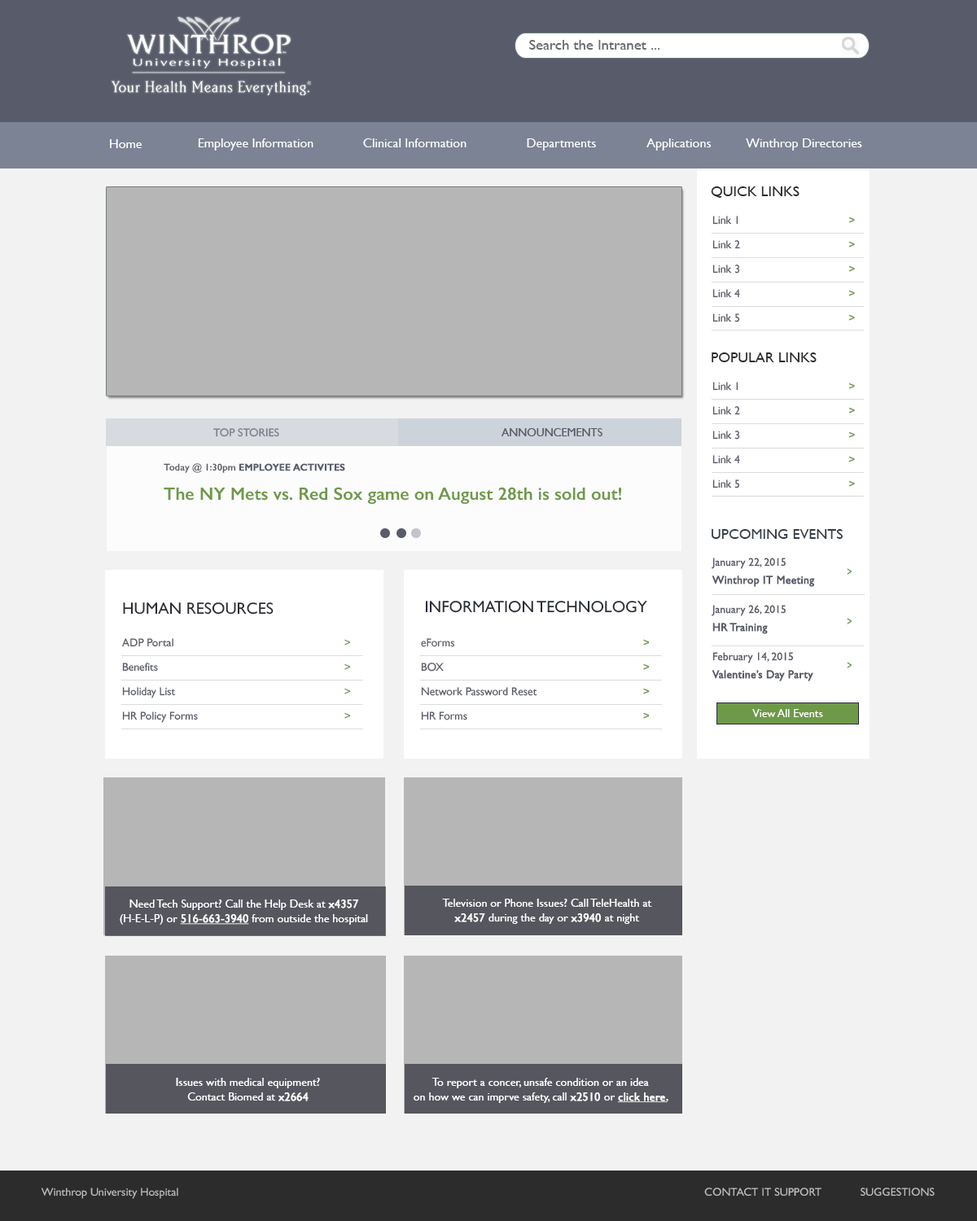
<style>
.page{position:relative;width:977px;height:1221px;background:#f2f2f2}
.page>*{position:absolute;margin:0}
.t1{font:14.7px "GillSans";color:#696b71;scale:1.03 1}
.t2{font:13px "GillSans";color:#ffffff}
.t3{font:14.7px "GillSans";color:#2c2c2d;text-transform:uppercase}
.t4{font:11.4px/24.4px "GillSans";color:#585b69}
.t5{font:11.4px/24.4px "GillSans";color:#6e9948}
.t6{font:17.9px/14.7px "GillSans-SemiBold";color:#6e9948}
.t7{font:9.8px/14.7px "GillSans-SemiBold";color:#6e9948}
.t8{font:9.8px/14.7px "GillSans-SemiBold";color:#585b69}
.t9{font:9.8px/14.7px "GillSans-SemiBold";color:#585b69;font-weight:bold}
.t10{font:14.7px "GillSans";color:#343d46;text-transform:uppercase}
.t11{font:11.4px/17.9px "GillSans";color:#585b69;font-weight:bold}
.t12{font:11.4px/17.9px "GillSans";color:#585b69}
.t13{font:11.4px/14.7px "GillSans";color:#585b69}
.t14{font:16.3px "GillSans";color:#292d39;text-transform:uppercase}
.t15{font:19.5px "GillSans";color:#292d39;text-transform:uppercase}
.t16{font:11.4px/14.7px "GillSans";color:#ffffff}
.t17{font:11.4px/14.7px "GillSans";color:#ffffff;font-weight:bold}
.t18{font:11.4px/14.7px "GillSans";color:#ffffff;font-weight:bold;text-decoration:underline}
.t19{font:11.4px "GillSans";color:#bebebe;text-transform:uppercase}
.t20{font:11.4px "GillSans";color:#bebebe}
</style>
<div class="page">
<p class="t1" style="left:529px;top:40px;width:131px;height:10px">Search the Intranet ...</p>
<p class="t2" style="left:110px;top:139px;width:32px;height:9px">Home</p>
<p class="t2" style="left:198px;top:138px;width:115px;height:13px">Employee Information</p>
<p class="t2" style="left:363px;top:138px;width:103px;height:9px">Clinical Information</p>
<p class="t2" style="left:527px;top:138px;width:69px;height:13px">Departments</p>
<p class="t2" style="left:646px;top:138px;width:65px;height:13px">Applications</p>
<p class="t2" style="left:746px;top:138px;width:116px;height:13px">Winthrop Directories</p>
<p class="t3" style="left:711px;top:186px;width:88px;height:12px">QUICK Links</p>
<p class="t4" style="left:712px;top:216px;width:143px;height:106px">Link 1           <span class="t5">&gt;<br></span>Link 2           <span class="t5">&gt;<br></span>Link 3          <span class="t5"> &gt;<br></span>Link 4           <span class="t5">&gt;<br></span>Link 5           <span class="t5">&gt;</span></p>
<p class="t3" style="left:711px;top:352px;width:105px;height:10px">Popular Links</p>
<p class="t4" style="left:712px;top:382px;width:143px;height:106px">Link 1           <span class="t5">&gt;<br></span>Link 2           <span class="t5">&gt;<br></span>Link 3          <span class="t5"> &gt;<br></span>Link 4           <span class="t5">&gt;<br></span>Link 5           <span class="t5">&gt;</span></p>
<p class="t6" style="left:164px;top:463px;width:457px;height:41px"><span class="t7">  </span><span class="t8"> Today @ 1:30pm </span><span class="t9">EMPLOYEE ACTIVITES<br> <br></span>The NY Mets vs. Red Sox game on August 28th is sold out!</p>
<p class="t10" style="left:711px;top:529px;width:131px;height:10px">Upcoming events</p>
<p class="t11" style="left:711px;top:558px;width:104px;height:123px"><span class="t12">January 22, 2015<br></span>Winthrop IT Meeting<br><br><span class="t13">January 26, 2015<br></span>HR Training<br><br><span class="t13">February 14, 2015<br></span>Valentine’s Day Party</p>
<p class="t14" style="left:123px;top:602px;width:150px;height:13px"><span class="t15"><br></span>Human Resources</p>
<p class="t14" style="left:425px;top:601px;width:222px;height:12px">Information technology</p>
<p class="t4" style="left:122px;top:638px;width:229px;height:85px">ADP Portal             <span class="t5">&gt;<br></span>Benefits             <span class="t5">&gt;<br></span>Holiday List            <span class="t5"> &gt;<br></span>HR Policy Forms           <span class="t5"> &gt;           &gt;</span></p>
<p class="t4" style="left:421px;top:638px;width:229px;height:82px">eForms             <span class="t5">&gt;<br></span>BOX              <span class="t5">&gt;<br></span>Network Password Reset         <span class="t5"> &gt;<br></span>HR Forms             <span class="t5">&gt;</span></p>
<p class="t16" style="left:120px;top:899px;width:248px;height:26px;text-align:center">Need Tech Support? Call the Help Desk at <span class="t17">x4357</span> (H-E-L-P) or <span class="t18">516-663-3940</span> from outside the hospital</p>
<p class="t16" style="left:442px;top:899px;width:210px;height:25px;text-align:center">Television or Phone Issues? Call TeleHealth at <span class="t17">x2457 </span>during the day or <span class="t17">x3940 </span>at night</p>
<p class="t16" style="left:176px;top:1078px;width:144px;height:23px;text-align:center">Issues with medical equipment? <br>Contact Biomed at <span class="t17">x2664</span></p>
<p class="t16" style="left:413px;top:1078px;width:255px;height:25px;text-align:center">To report a concer, unsafe condition or an idea <br>on how we can imprve safety, call <span class="t17">x2510 </span>or <span class="t18">click here.</span></p>
<p class="t19" style="left:41px;top:1188px;width:893px;height:11px"><span class="t20"><br>     Winthrop University Hospital                </span>      Contact IT Support    Suggestions</p>
</div>
